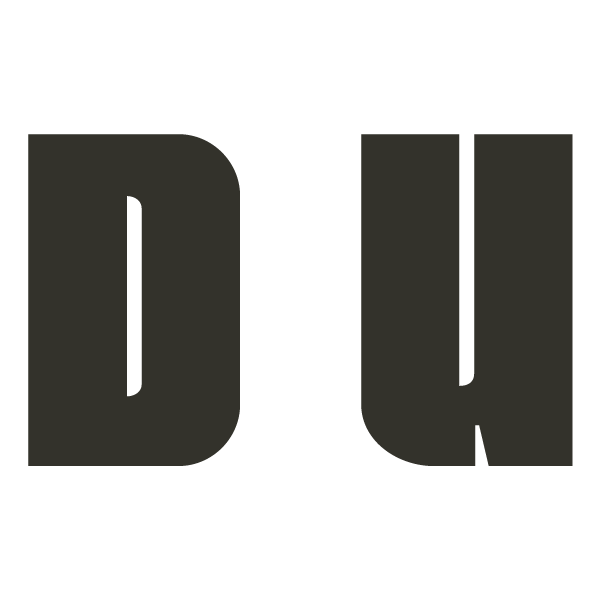
<style>
.page{position:relative;width:600px;height:600px;background:#ffffff}
.page>*{position:absolute;margin:0}
.t1{font:416.7px "Mobley-Sans";letter-spacing:0.25em;color:#33322b;text-transform:uppercase}
</style>
<div class="page">
<p class="t1" style="left:28px;top:134px;width:545px;height:332px">DU</p>
</div>
